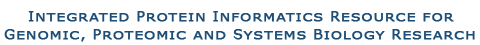
<style>
.page{position:relative;width:480px;height:45px;background:#ffffff}
.page>*{position:absolute;margin:0}
.t1{font:10.5px/9px "Verdana";letter-spacing:0.05em;color:#1e4e78;font-weight:bold;scale:1.33 1}
.t2{font:14px/9px "Verdana";letter-spacing:0.05em;color:#1e4e78;font-weight:bold}
</style>
<div class="page">
<p class="t1" style="left:4px;top:9px;width:473px;height:34px"><span class="t2">I</span>NTEGRATED <span class="t2">P</span>ROTEIN <span class="t2">I</span>NFORMATICS <span class="t2">R</span>ESOURCE FOR<br> <br><span class="t2">G</span>ENOMIC, <span class="t2">P</span>ROTEOMIC AND <span class="t2">S</span>YSTEMS <span class="t2">B</span>IOLOGY <span class="t2">R</span>ESEARCH</p>
</div>
